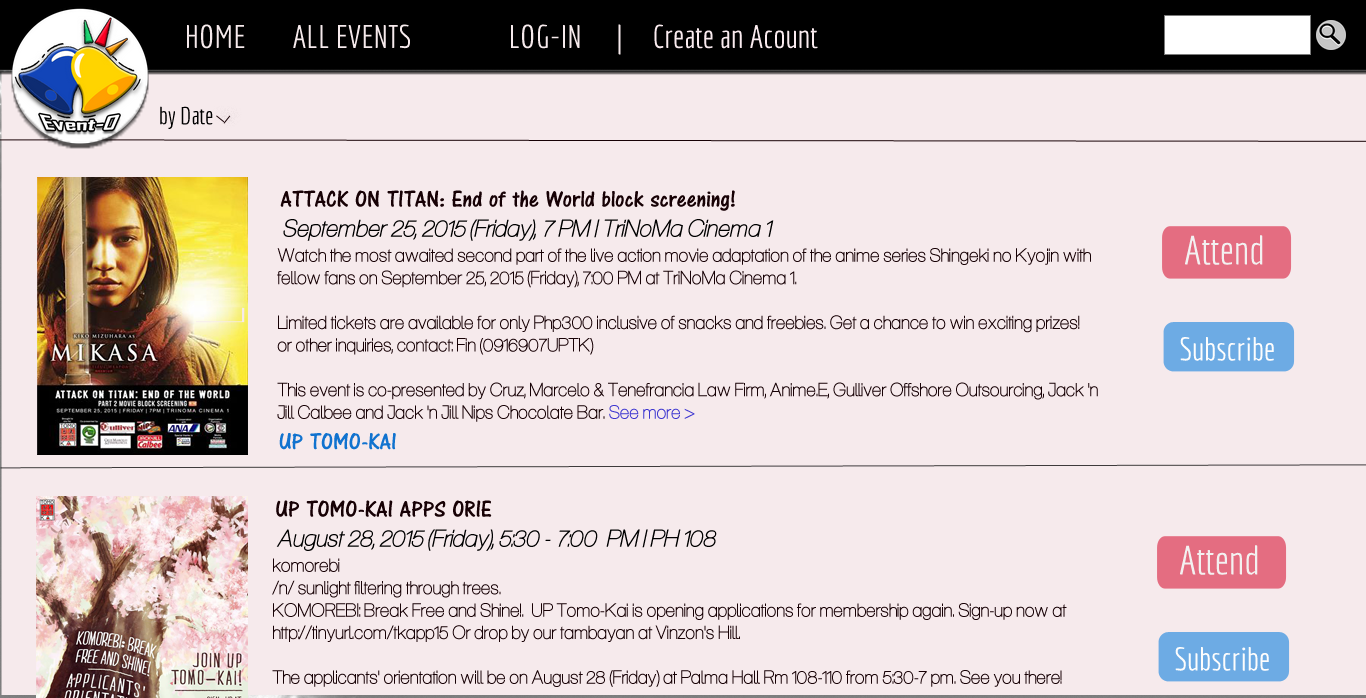
<style>
.page{position:relative;width:1366px;height:698px;background:#f6eaec}
.page>*{position:absolute;margin:0}
.t1{font:32px "Economica-Regular";color:#f6eaec}
.t2{font:24px "Economica-Regular";color:#f6eaec}
.t3{font:32px "Economica-Regular";color:#faebef}
.t4{font:24px "Economica-Regular";color:#000000}
.t5{font:24px "CENA-Normal";color:#170105}
.t6{font:24px "Aliquam-Italic";color:#000000}
.t7{font:40px "Economica-Regular";color:#f3f1f1}
.t8{font:18.7px "Aliquam";color:#170105}
.t9{font:18.7px "Aliquam";color:#3d36d0}
.t10{font:32px "Economica-Regular";color:#fdfdfd}
.t11{font:24px "CENA-Normal";color:#1173cf}
</style>
<div class="page">
<p class="t1" style="left:187px;top:24px;width:631px;height:31px"><span class="t2"> </span>HOME  ALL EVENTS   LOG-IN  | <span class="t3">Create an Acount</span></p>
<p class="t4" style="left:160px;top:106px;width:53px;height:23px">by Date</p>
<p class="t5" style="left:280px;top:190px;width:455px;height:21px">ATTACK ON TITAN: End of the World block screening!</p>
<p class="t6" style="left:283px;top:219px;width:491px;height:22px">September 25, 2015 (Friday), 7 PM | TriNoMa Cinema 1</p>
<p class="t7" style="left:1185px;top:235px;width:78px;height:30px">Attend</p>
<p class="t8" style="left:277px;top:248px;width:821px;height:174px">Watch the most awaited second part of the live action movie adaptation of the anime series Shingeki no Kyojin with fellow fans on September 25, 2015 (Friday), 7:00 PM at TriNoMa Cinema 1.<br><br>Limited tickets are available for only Php300 inclusive of snacks and freebies. Get a chance to win exciting prizes! <br>or other inquiries, contact: Fin (0916907UPTK)<br><br>This event is co-presented by Cruz, Marcelo &amp; Tenefrancia Law Firm, Anime.E, Gulliver Offshore Outsourcing, Jack 'n Jill Calbee and Jack 'n Jill Nips Chocolate Bar. <span class="t9">See more &gt;<br></span><br>In cooperation with All Nippon Airways.<br><br>Special thanks to Viva PSICOM.<br><br>Partner organizations: UP Volleyball Club and UP Mathematics' Majors Circle</p>
<p class="t10" style="left:1180px;top:337px;width:94px;height:24px">Subscribe</p>
<p class="t11" style="left:279px;top:433px;width:117px;height:17px">UP TOMO-KAI</p>
<p class="t5" style="left:276px;top:500px;width:216px;height:17px">UP TOMO-KAI APPS ORIE</p>
<p class="t6" style="left:276px;top:529px;width:441px;height:22px">August 28, 2015 (Friday), 5:30 - 7:00  PM | PH 108</p>
<p class="t7" style="left:1180px;top:545px;width:78px;height:30px">Attend</p>
<p class="t10" style="left:1175px;top:647px;width:94px;height:24px">Subscribe</p>
</div>
